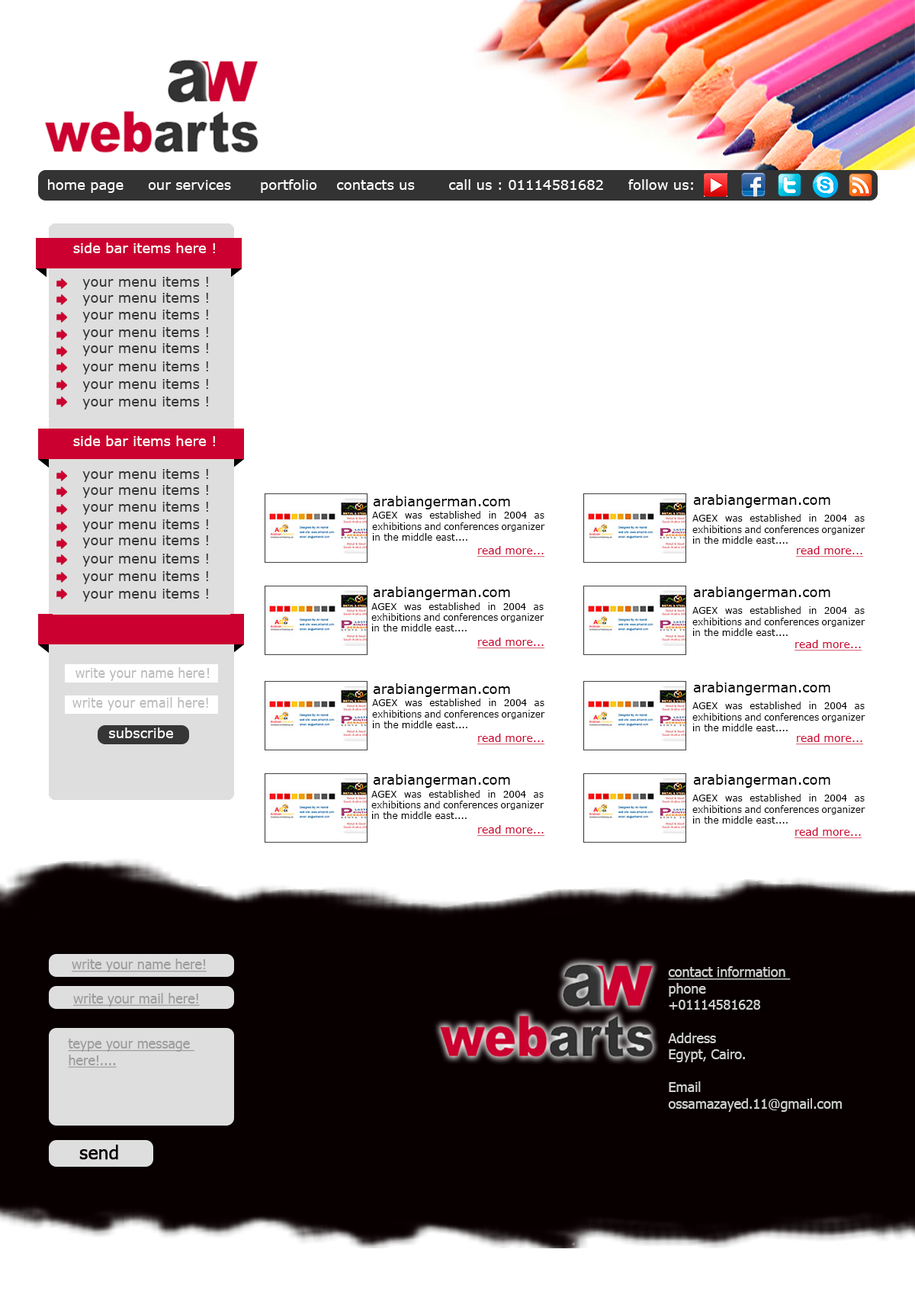
<style>
.page{position:relative;width:915px;height:1304px;background:#ffffff}
.page>*{position:absolute;margin:0}
.t1{font:13.7px "Verdana";color:#ffffff}
.t2{font:13.7px "Verdana";color:#333333}
.t3{font:13.7px "Verdana";color:#000000}
.t4{font:9.1px "Verdana";color:#000000}
.t5{font:10.7px "Verdana";color:#cb0030;text-decoration:underline}
.t6{font:13.7px "Verdana";color:#bbbbbb;scale:0.87 1}
.t7{font:13.7px "Verdana";color:#bbbbbb}
.t8{font:13.7px "Verdana";color:#bbbbbb;scale:0.9 1}
.t9{font:13.7px "Tahoma";color:#9d9c9c;text-decoration:underline}
.t10{font:13.7px "Tahoma";color:#d1d1d1}
.t11{font:13.7px "Tahoma";color:#d1d1d1;text-decoration:underline}
.t12{font:18.3px "Tahoma";color:#080000;font-weight:bold}
</style>
<div class="page">
<p class="t1" style="left:43px;top:179px;width:650px;height:14px"><span class="t2">i</span>home page     our services      portfolio    contacts us       call us : 01114581682     follow us:</p>
<p class="t1" style="left:73px;top:242px;width:142px;height:11px">side bar items here !</p>
<p class="t2" style="left:82px;top:277px;width:126px;height:13px">your menu items !</p>
<p class="t2" style="left:82px;top:293px;width:126px;height:13px">your menu items !</p>
<p class="t2" style="left:82px;top:309px;width:126px;height:13px">your menu items !</p>
<p class="t2" style="left:82px;top:327px;width:126px;height:13px">your menu items !</p>
<p class="t2" style="left:82px;top:343px;width:126px;height:13px">your menu items !</p>
<p class="t2" style="left:82px;top:361px;width:126px;height:13px">your menu items !</p>
<p class="t2" style="left:82px;top:379px;width:126px;height:13px">your menu items !</p>
<p class="t2" style="left:82px;top:396px;width:126px;height:13px">your menu items !</p>
<p class="t1" style="left:73px;top:435px;width:142px;height:11px">side bar items here !</p>
<p class="t2" style="left:82px;top:469px;width:126px;height:13px">your menu items !</p>
<p class="t2" style="left:82px;top:485px;width:126px;height:13px">your menu items !</p>
<p class="t3" style="left:373px;top:495px;width:137px;height:14px">arabiangerman.com</p>
<p class="t3" style="left:693px;top:494px;width:137px;height:14px">arabiangerman.com</p>
<p class="t2" style="left:82px;top:502px;width:126px;height:13px">your menu items !</p>
<p class="t2" style="left:82px;top:519px;width:126px;height:13px">your menu items !</p>
<p class="t4" style="left:372px;top:511px;width:173px;height:29px;text-align:justify">AGEX was established in 2004 as exhibitions and conferences organizer in the middle east....</p>
<p class="t4" style="left:692px;top:514px;width:173px;height:30px;text-align:justify">AGEX was established in 2004 as exhibitions and conferences organizer in the middle east....</p>
<p class="t2" style="left:82px;top:535px;width:126px;height:13px">your menu items !</p>
<p class="t5" style="left:477px;top:546px;width:68px;height:11px">read more...</p>
<p class="t5" style="left:796px;top:546px;width:68px;height:11px">read more...</p>
<p class="t2" style="left:82px;top:553px;width:126px;height:13px">your menu items !</p>
<p class="t2" style="left:82px;top:571px;width:126px;height:13px">your menu items !</p>
<p class="t2" style="left:82px;top:588px;width:126px;height:13px">your menu items !</p>
<p class="t3" style="left:373px;top:586px;width:137px;height:14px">arabiangerman.com</p>
<p class="t3" style="left:693px;top:586px;width:137px;height:14px">arabiangerman.com</p>
<p class="t4" style="left:371px;top:602px;width:173px;height:29px;text-align:justify">AGEX was established in 2004 as exhibitions and conferences organizer in the middle east....</p>
<p class="t4" style="left:692px;top:606px;width:173px;height:30px;text-align:justify">AGEX was established in 2004 as exhibitions and conferences organizer in the middle east....</p>
<p class="t5" style="left:477px;top:637px;width:68px;height:12px">read more...</p>
<p class="t5" style="left:794px;top:640px;width:68px;height:11px">read more...</p>
<p class="t6" style="left:75px;top:667px;width:130px;height:14px">write your name here</p>
<p class="t7" style="left:207px;top:668px;width:3px;height:10px">!</p>
<p class="t3" style="left:373px;top:683px;width:137px;height:14px">arabiangerman.com</p>
<p class="t3" style="left:693px;top:681px;width:137px;height:14px">arabiangerman.com</p>
<p class="t8" style="left:72px;top:697px;width:136px;height:13px">write your email here!</p>
<p class="t4" style="left:372px;top:698px;width:173px;height:30px;text-align:justify">AGEX was established in 2004 as exhibitions and conferences organizer in the middle east....</p>
<p class="t4" style="left:692px;top:701px;width:173px;height:30px;text-align:justify">AGEX was established in 2004 as exhibitions and conferences organizer in the middle east....</p>
<p class="t1" style="left:109px;top:727px;width:64px;height:11px">subscribe</p>
<p class="t5" style="left:477px;top:733px;width:68px;height:12px">read more...</p>
<p class="t5" style="left:796px;top:733px;width:68px;height:12px">read more...</p>
<p class="t3" style="left:373px;top:774px;width:137px;height:13px">arabiangerman.com</p>
<p class="t3" style="left:693px;top:774px;width:137px;height:13px">arabiangerman.com</p>
<p class="t4" style="left:371px;top:790px;width:173px;height:29px;text-align:justify">AGEX was established in 2004 as exhibitions and conferences organizer in the middle east....</p>
<p class="t4" style="left:692px;top:794px;width:173px;height:29px;text-align:justify">AGEX was established in 2004 as exhibitions and conferences organizer in the middle east....</p>
<p class="t5" style="left:477px;top:825px;width:68px;height:11px">read more...</p>
<p class="t5" style="left:794px;top:827px;width:68px;height:12px">read more...</p>
<p class="t9" style="left:72px;top:958px;width:135px;height:14px">write your name here!</p>
<p class="t10" style="left:668px;top:966px;width:174px;height:145px;text-align:justify"><span class="t11">contact information <br></span>phone<br>+01114581628<br><br>Address<br>Egypt, Cairo.<br><br>Email<br>ossamazayed.11@gmail.com</p>
<p class="t9" style="left:73px;top:993px;width:127px;height:13px">write your mail here!</p>
<p class="t9" style="left:68px;top:1038px;width:126px;height:29px;text-align:justify">teype your message <br>here!....</p>
<p class="t12" style="left:79px;top:1144px;width:39px;height:15px">send</p>
</div>
